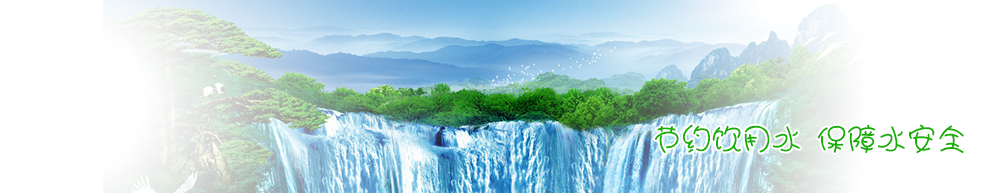
<style>
.page{position:relative;width:1004px;height:193px;background:#ffffff}
.page>*{position:absolute;margin:0}
.t1{font:30px "HYj2gj";color:#18ae03}
</style>
<div class="page">
<p class="t1" style="left:655px;top:124px;width:309px;height:30px">节约饮用水 保障水安全</p>
</div>
